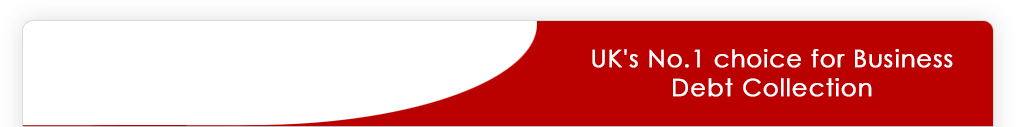
<style>
.page{position:relative;width:1016px;height:127px;background:#ffffff}
.page>*{position:absolute;margin:0}
.t1{font:24px "CenturyGothic";letter-spacing:0.025em;color:#ffffff;font-weight:bold}
</style>
<div class="page">
<p class="t1" style="left:592px;top:49px;width:361px;height:48px;text-align:center">UK's No.1 choice for Business<br>Debt Collection</p>
</div>
